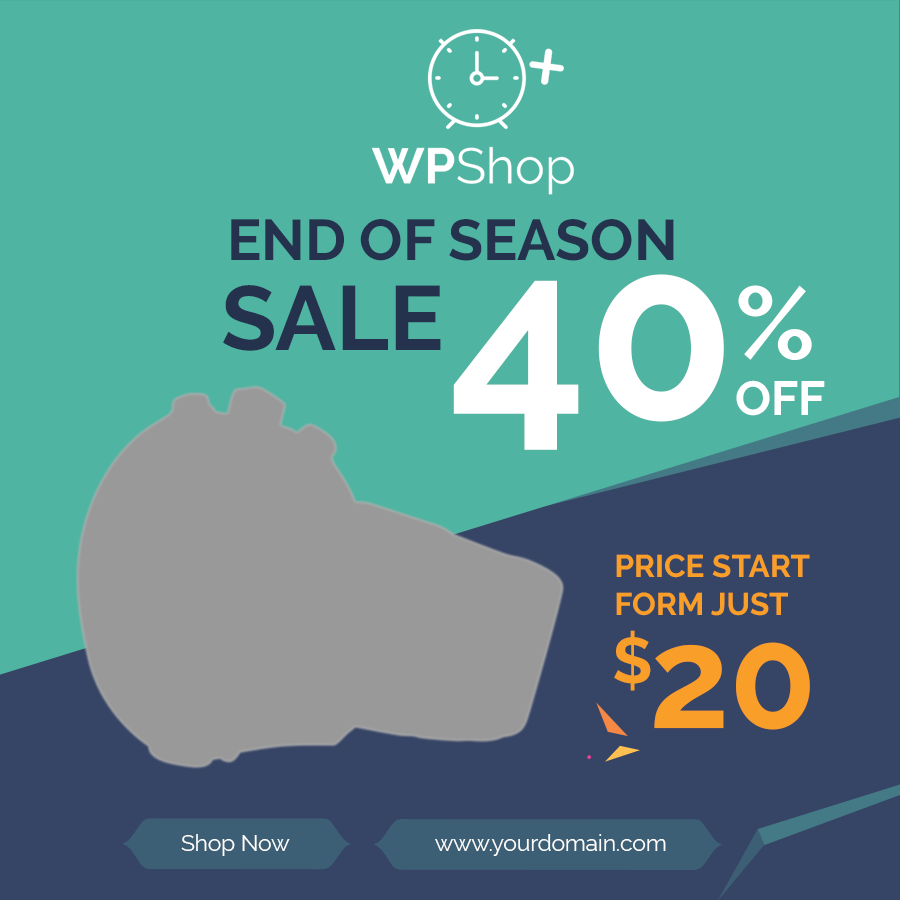
<style>
.page{position:relative;width:900px;height:900px;background:#4fb4a1}
.page>*{position:absolute;margin:0}
.t1{font:57.2px "Raleway-Bold";color:#24324e}
.t2{font:242px "Raleway-Bold";color:#ffffff}
.t3{font:90.7px "Raleway-Bold";color:#24324e}
.t4{font:101.7px "Raleway-Bold";color:#ffffff}
.t5{font:47.6px "Raleway-Bold";color:#ffffff}
.t6{font:31.6px "Raleway-Bold";color:#f99e28}
.t7{font:64.1px "Raleway-Bold";color:#f99e28}
.t8{font:143.3px "Raleway-Bold";color:#f99e28}
.t9{font:22.5px "Raleway-Regular";color:#ffffff}
</style>
<div class="page">
<p class="t1" style="left:231px;top:219px;width:443px;height:42px">END OF SEASON</p>
<p class="t2" style="left:453px;top:274px;width:271px;height:176px">40</p>
<p class="t3" style="left:223px;top:285px;width:218px;height:66px">SALE</p>
<p class="t4" style="left:738px;top:285px;width:74px;height:76px">%</p>
<p class="t5" style="left:736px;top:380px;width:89px;height:36px">OFF</p>
<p class="t6" style="left:616px;top:554px;width:194px;height:62px">PRICE START<br>FORM JUST</p>
<p class="t7" style="left:614px;top:630px;width:37px;height:61px">$</p>
<p class="t8" style="left:654px;top:642px;width:156px;height:88px">20</p>
<p class="t9" style="left:181px;top:834px;width:109px;height:22px">Shop Now</p>
<p class="t9" style="left:435px;top:834px;width:231px;height:22px">www.yourdomain.com</p>
</div>
